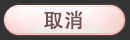
<style>
.page{position:relative;width:130px;height:40px;background:#333333}
.page>*{position:absolute;margin:0}
.t1{font:20px "AdobeHeitiStd-Regular";color:#705555;font-weight:bold}
</style>
<div class="page">
<p class="t1" style="left:44px;top:10px;width:39px;height:20px">取消</p>
</div>
